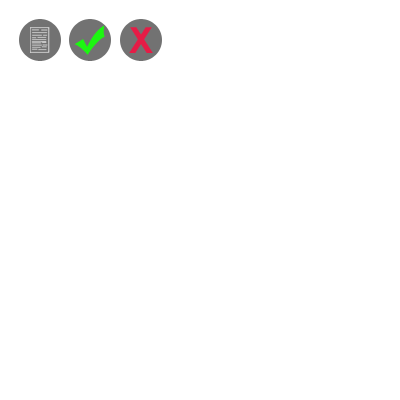
<style>
.page{position:relative;width:400px;height:400px;background:#ffffff}
.page>*{position:absolute;margin:0}
.t1{font:36px "Arial-BoldMT";color:#e51c46}
</style>
<div class="page">
<p class="t1" style="left:129px;top:27px;width:24px;height:26px">X</p>
</div>
